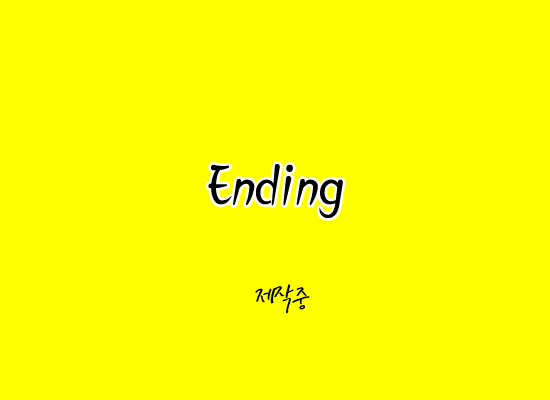
<style>
.page{position:relative;width:550px;height:400px;background:#ffff00}
.page>*{position:absolute;margin:0}
.t1{font:72px "SJSoju2";letter-spacing:-0.05em;color:#000000;scale:0.9 1}
.t2{font:30px "SanBsB";letter-spacing:-0.075em;color:#000000;scale:0.8 1}
</style>
<div class="page">
<p class="t1" style="left:208px;top:164px;width:135px;height:54px">Ending</p>
<p class="t2" style="left:255px;top:284px;width:55px;height:30px">제작중</p>
</div>
